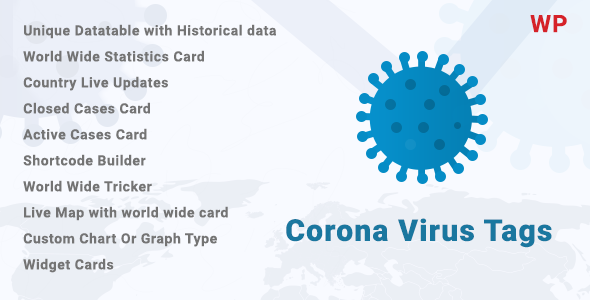
<style>
.page{position:relative;width:590px;height:300px;background:#f8faff}
.page>*{position:absolute;margin:0}
.t1{font:24px "Roboto-Bold";letter-spacing:0.04em;color:#e01c21}
.t2{font:14px/26px "Roboto-Bold";letter-spacing:0.04em;color:#747474}
.t3{font:30px "Roboto-Black";letter-spacing:0.04em;color:#1a779f}
</style>
<div class="page">
<p class="t1" style="left:530px;top:15px;width:37px;height:18px">WP</p>
<p class="t2" style="left:23px;top:24px;width:253px;height:249px">Unique Datatable with Historical data<br>World Wide Statistics Card<br>Country Live Updates<br>Closed Cases Card<br>Active Cases Card<br>Shortcode Builder<br>World Wide Tricker<br>Live Map with world wide card<br>Custom Chart Or Graph Type<br>Widget Cards</p>
<p class="t3" style="left:286px;top:218px;width:266px;height:30px">Corona Virus Tags</p>
</div>
